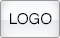
<style>
.page{position:relative;width:60px;height:38px}
.page>*{position:absolute;margin:0}
.t1{font:15px "Helvetica";color:#000000}
</style>
<div class="page">
<p class="t1" style="left:10px;top:13px;width:42px;height:12px">LOGO</p>
</div>
